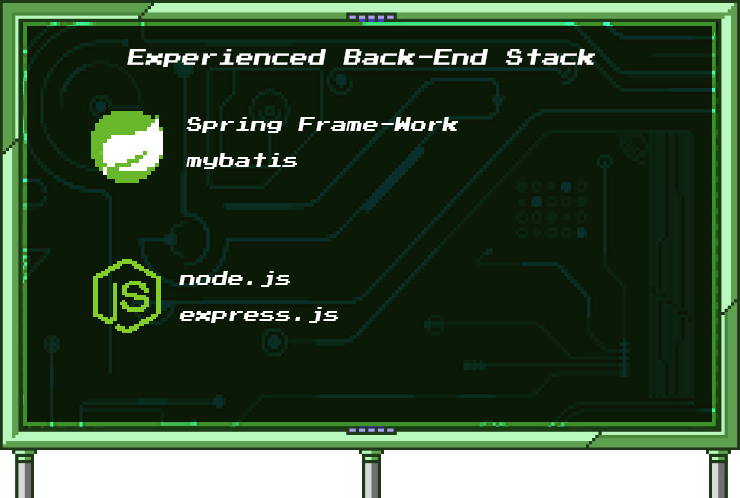
<style>
.page{position:relative;width:740px;height:498px;background:#0b1a07}
.page>*{position:absolute;margin:0}
.t1{font:18px "PressStart2P";color:#ffffff;font-style:italic}
.t2{font:16px/36px "PressStart2P";color:#ffffff;font-style:italic}
</style>
<div class="page">
<p class="t1" style="left:127px;top:49px;width:468px;height:18px">Experienced Back-End Stack</p>
<p class="t2" style="left:186px;top:117px;width:272px;height:52px">Spring Frame-Work<br>mybatis</p>
<p class="t2" style="left:179px;top:271px;width:159px;height:52px">node.js<br>express.js</p>
</div>
